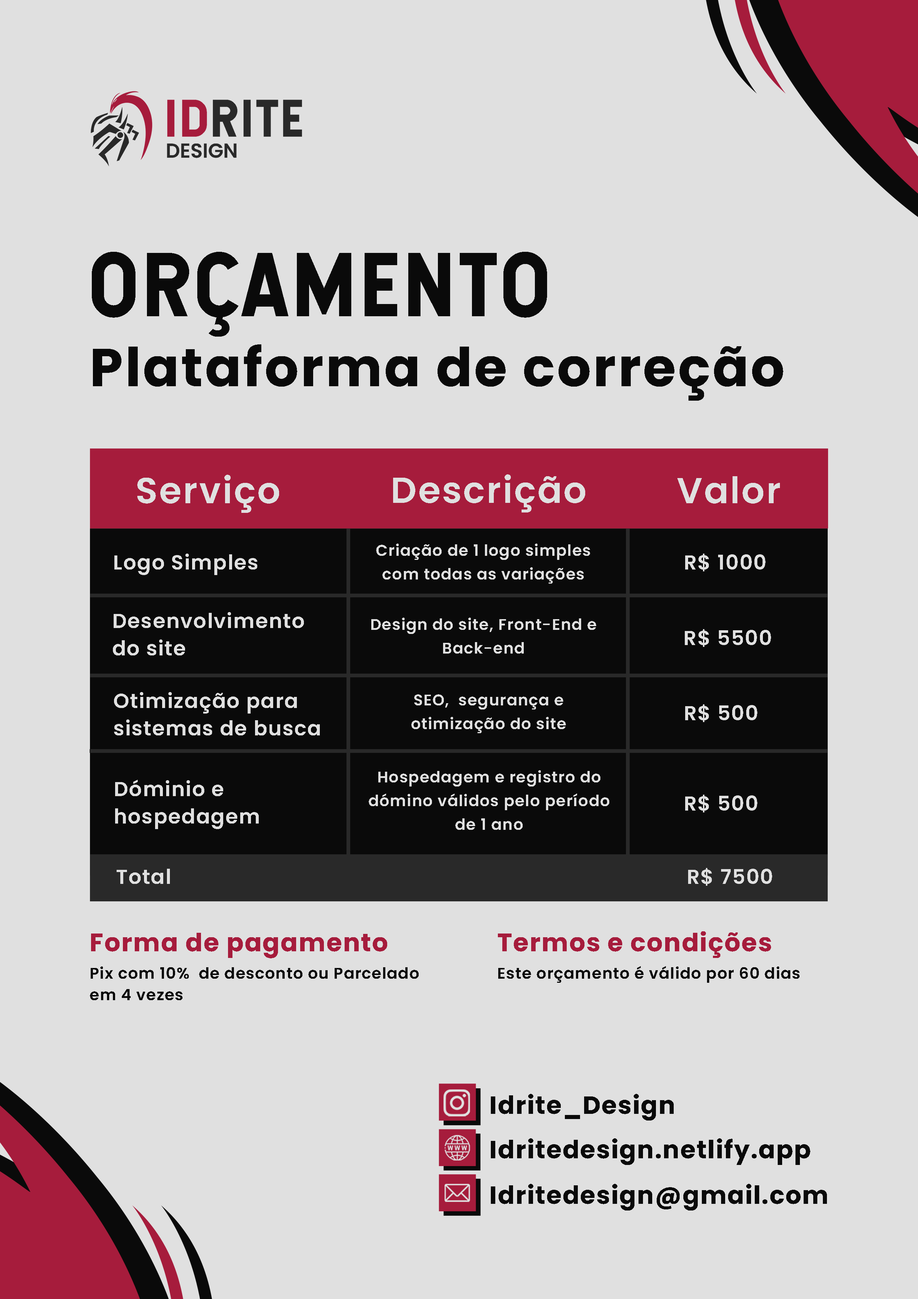
<style>
.page{position:relative;width:918px;height:1299px;background:#e0e0e0}
.page>*{position:absolute;margin:0}
.t1{font:86.3px "Hansief";letter-spacing:0.04em;color:#0a0a0a;text-transform:uppercase}
.t2{font:53.3px "Poppins-Bold";letter-spacing:0.04em;color:#0a0a0a}
.t3{font:36.3px "Poppins-SemiBold";letter-spacing:0.04em;color:#e0e0e0}
.t4{font:15.5px/23.7px "Poppins-SemiBold";letter-spacing:0.04em;color:#e0e0e0}
.t5{font:20.4px "Poppins-SemiBold";letter-spacing:0.04em;color:#e0e0e0}
.t6{font:20.4px/27.4px "Poppins-SemiBold";letter-spacing:0.04em;color:#e0e0e0}
.t7{font:25.2px "Poppins-Bold";letter-spacing:0.04em;color:#a61c3c}
.t8{font:15.5px "Poppins-SemiBold";letter-spacing:0.04em;color:#0a0a0a}
.t9{font:15.5px/21.5px "Poppins-SemiBold";letter-spacing:0.04em;color:#0a0a0a}
</style>
<div class="page">
<p class="t1" style="left:92px;top:252px;width:455px;height:85px">Orçamento</p>
<p class="t2" style="left:93px;top:344px;width:690px;height:57px">Plataforma de correção</p>
<p class="t3" style="left:137px;top:475px;width:142px;height:38px">Serviço</p>
<p class="t3" style="left:393px;top:474px;width:192px;height:38px">Descrição</p>
<p class="t3" style="left:678px;top:476px;width:102px;height:28px">Valor</p>
<p class="t4" style="left:376px;top:543px;width:214px;height:40px;text-align:center">Criação de 1 logo simples com todas as variações</p>
<p class="t5" style="left:114px;top:553px;width:143px;height:22px">Logo Simples</p>
<p class="t5" style="left:685px;top:553px;width:81px;height:18px">R$ 1000</p>
<p class="t6" style="left:113px;top:612px;width:191px;height:43px">Desenvolvimento <br>do site</p>
<p class="t4" style="left:371px;top:618px;width:225px;height:35px;text-align:center">Design do site, Front-End e Back-end</p>
<p class="t5" style="left:685px;top:629px;width:86px;height:18px">R$ 5500</p>
<p class="t6" style="left:114px;top:692px;width:206px;height:43px">Otimização para sistemas de busca</p>
<p class="t4" style="left:411px;top:694px;width:155px;height:39px;text-align:center">SEO,  segurança e <br>otimização do site</p>
<p class="t5" style="left:685px;top:704px;width:72px;height:18px">R$ 500</p>
<p class="t4" style="left:369px;top:770px;width:240px;height:60px;text-align:center">Hospedagem e registro do dómino válidos pelo período de 1 ano</p>
<p class="t6" style="left:115px;top:780px;width:144px;height:49px">Dóminio e <br>hospedagem</p>
<p class="t5" style="left:685px;top:794px;width:72px;height:18px">R$ 500</p>
<p class="t5" style="left:117px;top:869px;width:53px;height:15px">Total</p>
<p class="t5" style="left:688px;top:868px;width:84px;height:18px">R$ 7500</p>
<p class="t7" style="left:91px;top:933px;width:296px;height:25px">Forma de pagamento</p>
<p class="t7" style="left:498px;top:931px;width:273px;height:27px">Termos e condições</p>
<p class="t8" style="left:498px;top:966px;width:302px;height:17px">Este orçamento é válido por 60 dias</p>
<p class="t9" style="left:90px;top:966px;width:329px;height:34px">Pix com 10%  de desconto ou Parcelado <br>em 4 vezes</p>
</div>
